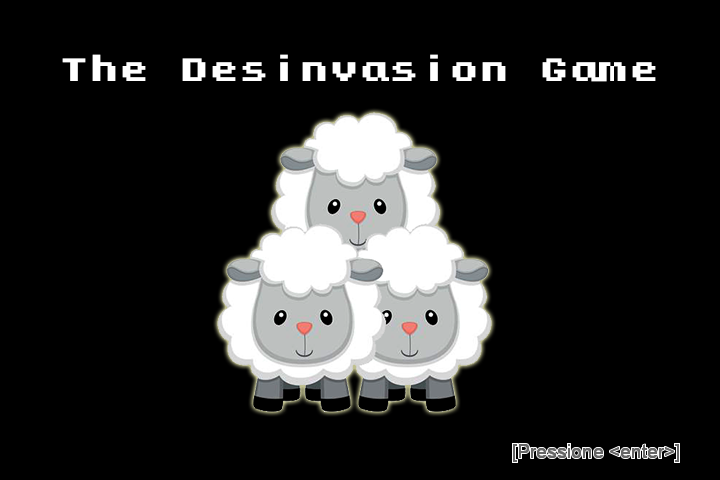
<style>
.page{position:relative;width:720px;height:480px;background:#000000}
.page>*{position:absolute;margin:0}
.t1{font:30px "KongtextRegular";color:#ffffff}
</style>
<div class="page">
<p class="t1" style="left:62px;top:54px;width:594px;height:28px">The Desinvasion Game</p>
</div>
